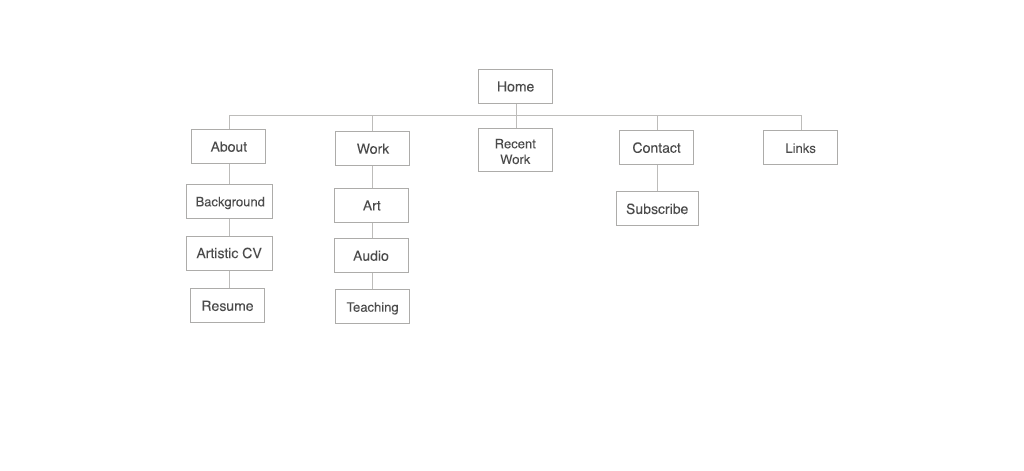
<style>
.page{position:relative;width:1024px;height:471px;background:#ffffff}
.page>*{position:absolute;margin:0}
.t1{font:14px "Helvetica";color:#4b4b4b}
.t2{font:13px "Helvetica";color:#4b4b4b}
</style>
<div class="page">
<p class="t1" style="left:498px;top:81px;width:36px;height:11px">Home</p>
<p class="t1" style="left:210px;top:141px;width:37px;height:11px">About</p>
<p class="t1" style="left:357px;top:143px;width:33px;height:11px">Work</p>
<p class="t2" style="left:495px;top:138px;width:41px;height:27px;text-align:center">Recent<br>Work</p>
<p class="t1" style="left:633px;top:142px;width:48px;height:11px">Contact</p>
<p class="t2" style="left:786px;top:143px;width:30px;height:11px">Links</p>
<p class="t2" style="left:196px;top:196px;width:69px;height:14px">Background</p>
<p class="t1" style="left:363px;top:200px;width:18px;height:11px">Art</p>
<p class="t1" style="left:626px;top:203px;width:62px;height:12px">Subscribe</p>
<p class="t1" style="left:196px;top:247px;width:66px;height:12px">Artistic CV</p>
<p class="t1" style="left:353px;top:250px;width:36px;height:11px">Audio</p>
<p class="t1" style="left:202px;top:300px;width:51px;height:12px">Resume</p>
<p class="t2" style="left:346px;top:302px;width:52px;height:13px">Teaching</p>
</div>
